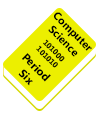
<style>
.page{position:relative;width:100px;height:116px;background:#ffffff}
.page>*{position:absolute;margin:0}
.t1{font:10.8px "LaoUI-Bold";color:#000000}
.t2{font:7.8px "LaoUI-Bold";color:#000000}
.t3{font:11.4px "LaoUI-Bold";color:#000000}
</style>
<div class="page">
<p class="t1" style="left:48px;top:12px;width:44px;height:45px;text-align:center;rotate:45deg">Computer<br>Science</p>
<p class="t2" style="left:36px;top:39px;width:29px;height:29px;rotate:45deg">1010001010101010101001010010101011011010101010101010</p>
<p class="t3" style="left:18px;top:53px;width:33px;height:33px;text-align:center;rotate:45deg">Period<br>Six</p>
</div>
